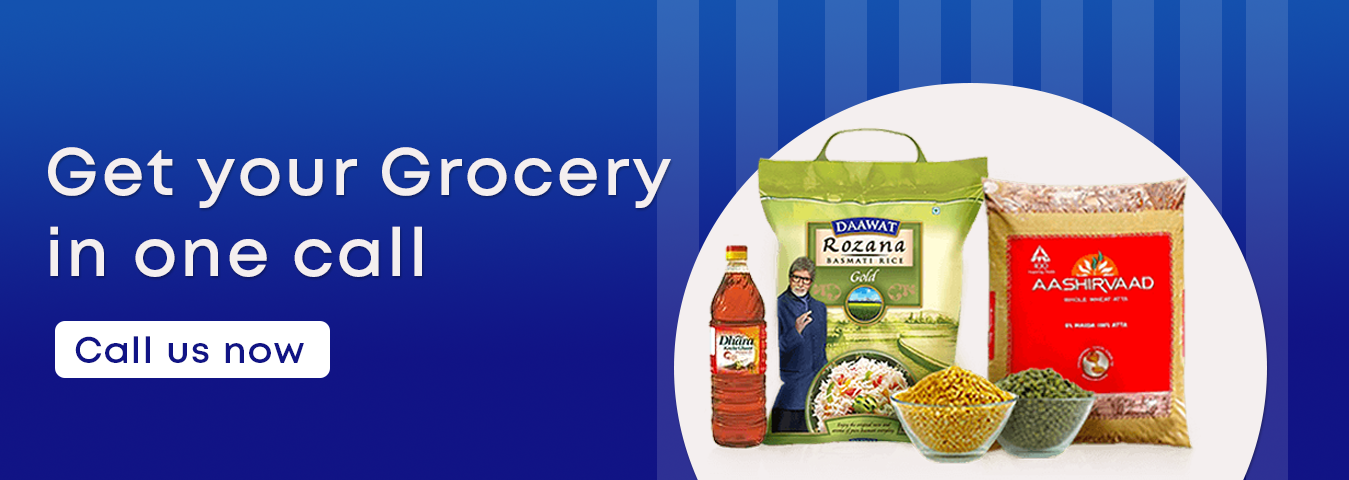
<style>
.page{position:relative;width:1349px;height:480px}
.page>*{position:absolute;margin:0}
.t1{font:67.1px "Mont-SemiBold";letter-spacing:0.05em;color:#f4efef}
.t2{font:36.4px "Mont-SemiBold";letter-spacing:0.05em;color:#111485}
</style>
<div class="page">
<p class="t1" style="left:48px;top:147px;width:623px;height:130px">Get your Grocery <br>in one call</p>
<p class="t2" style="left:75px;top:336px;width:229px;height:27px">Call us now</p>
</div>
